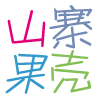
<style>
.page{position:relative;width:100px;height:100px;background:#ffffff}
.page>*{position:absolute;margin:0}
.t1{font:49.3px "HYg3gj";color:#738ab5;scale:1.07 1}
.t2{font:49.3px "HYg3gj";color:#e3007b;scale:1.07 1}
.t3{font:49.3px "HYg3gj";color:#3399cc;scale:1.07 1}
.t4{font:49.3px "HYg3gj";color:#85c056;scale:1.07 1}
</style>
<div class="page">
<p class="t1" style="left:49px;top:5px;width:44px;height:44px">寨</p>
<p class="t2" style="left:7px;top:10px;width:39px;height:37px">山</p>
<p class="t3" style="left:5px;top:53px;width:43px;height:41px">果</p>
<p class="t4" style="left:51px;top:50px;width:40px;height:44px">壳</p>
</div>
